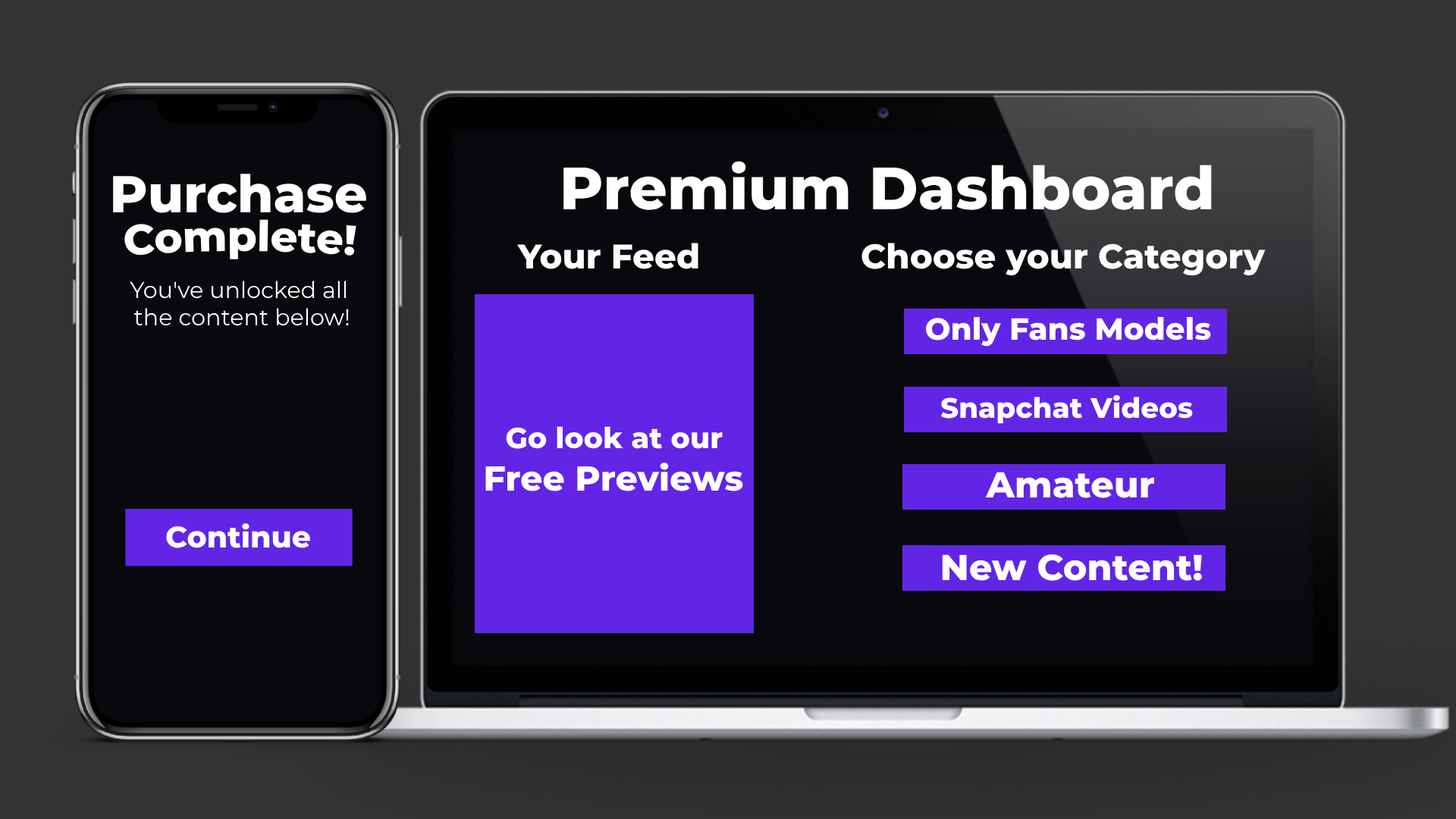
<style>
.page{position:relative;width:1456px;height:819px;background:#09090d}
.page>*{position:absolute;margin:0}
.t1{font:59.6px "Montserrat-ExtraBold";color:#ffffff}
.t2{font:51.8px "Montserrat-ExtraBold";color:#ffffff}
.t3{font:42.3px "Montserrat-ExtraBold";color:#ffffff}
.t4{font:34.1px "Montserrat-ExtraBold";color:#ffffff}
.t5{font:22.9px "Montserrat-Regular";color:#ffffff}
.t6{font:30.5px "Montserrat-ExtraBold";color:#ffffff}
.t7{font:28.2px "Montserrat-ExtraBold";color:#ffffff}
.t8{font:28.9px "Montserrat-ExtraBold";color:#ffffff}
.t9{font:34.7px "Montserrat-ExtraBold";color:#ffffff}
.t10{font:36.1px "Montserrat-ExtraBold";color:#ffffff}
.t11{font:29.9px "Montserrat-ExtraBold";color:#ffffff}
</style>
<div class="page">
<p class="t1" style="left:563px;top:161px;width:649px;height:49px">Premium Dashboard</p>
<p class="t2" style="left:113px;top:174px;width:253px;height:39px">Purchase</p>
<p class="t3" style="left:124px;top:219px;width:232px;height:40px">Complete!</p>
<p class="t4" style="left:517px;top:243px;width:181px;height:26px">Your Feed</p>
<p class="t4" style="left:861px;top:243px;width:405px;height:33px">Choose your Category</p>
<p class="t5" style="left:130px;top:281px;width:219px;height:45px;text-align:center">You've unlocked all <br>the content below!</p>
<p class="t6" style="left:926px;top:317px;width:285px;height:30px">Only Fans Models</p>
<p class="t7" style="left:940px;top:395px;width:253px;height:29px">Snapchat Videos</p>
<p class="t8" style="left:506px;top:426px;width:217px;height:23px">Go look at our</p>
<p class="t9" style="left:485px;top:463px;width:258px;height:28px">Free Previews</p>
<p class="t10" style="left:985px;top:472px;width:169px;height:26px">Amateur</p>
<p class="t11" style="left:166px;top:523px;width:144px;height:25px">Continue</p>
<p class="t10" style="left:942px;top:554px;width:260px;height:27px">New Content!</p>
</div>
